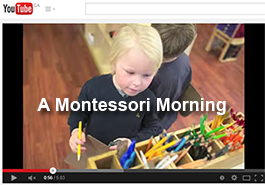
<style>
.page{position:relative;width:265px;height:185px}
.page>*{position:absolute;margin:0}
.t1{font:18px "Arial-BoldMT";color:#ffffff}
</style>
<div class="page">
<p class="t1" style="left:37px;top:98px;width:189px;height:17px">A Montessori Morning</p>
</div>
